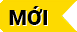
<style>
.page{position:relative;width:77px;height:32px;background:#fdda00}
.page>*{position:absolute;margin:0}
.t1{font:21.1px "Roboto-Black";color:#000000}
</style>
<div class="page">
<p class="t1" style="left:9px;top:6px;width:38px;height:19px">MỚI</p>
</div>
